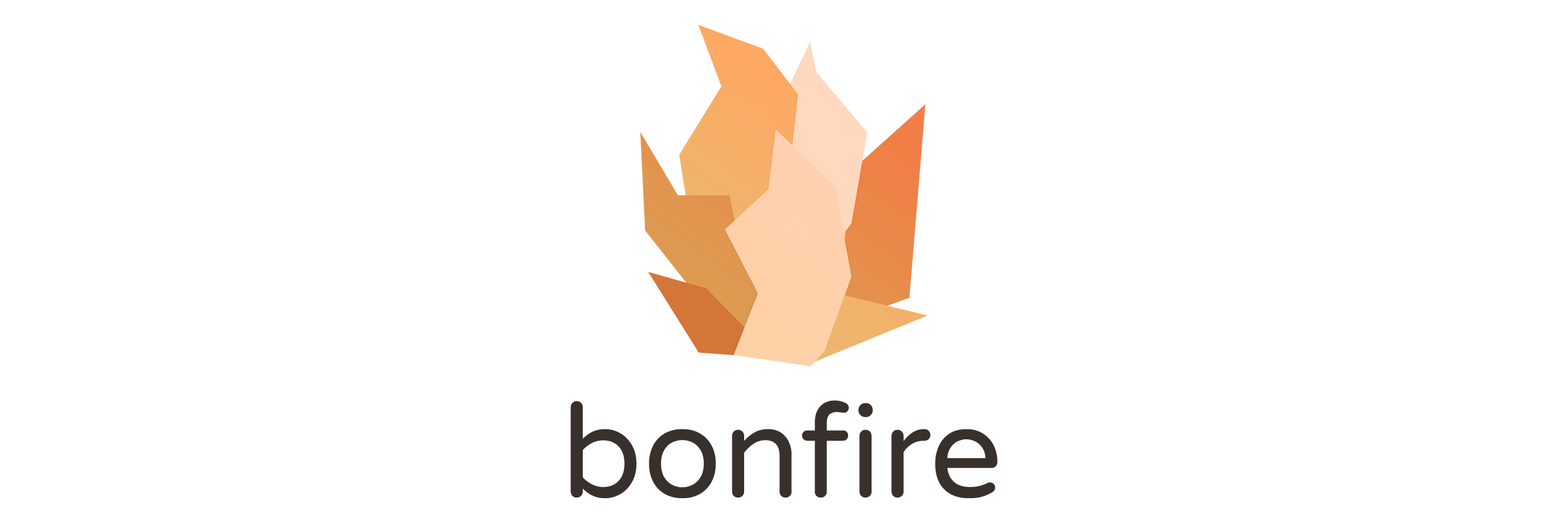
<style>
.page{position:relative;width:1568px;height:523px;background:#ffffff}
.page>*{position:absolute;margin:0}
.t1{font:130px "VarelaRound-Regular";color:#38302c}
</style>
<div class="page">
<p class="t1" style="left:570px;top:400px;width:428px;height:98px">bonfire</p>
</div>
